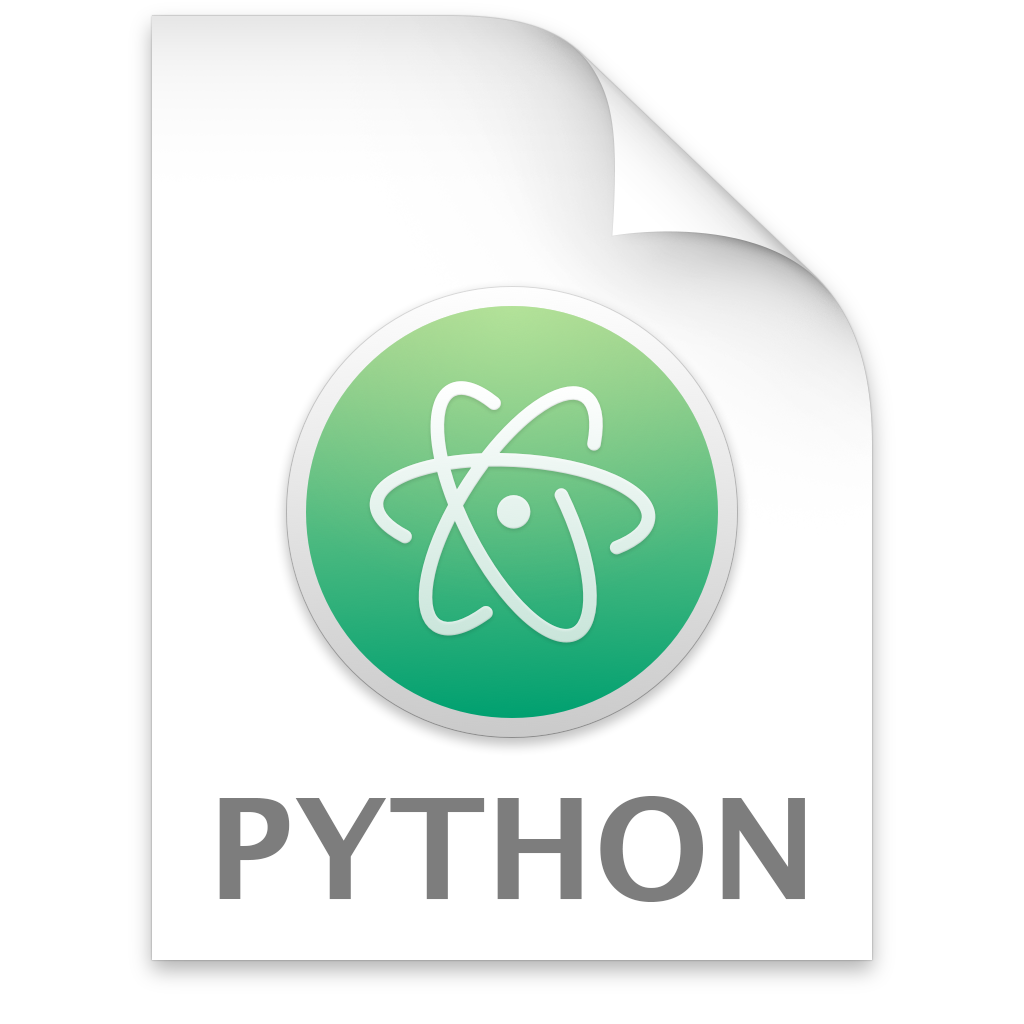
<style>
.page{position:relative;width:1024px;height:1024px;background:#ffffff}
.page>*{position:absolute;margin:0}
.t1{font:140px "LucidaGrande-Bold";color:#7d7d7d}
</style>
<div class="page">
<p class="t1" style="left:219px;top:796px;width:586px;height:106px">PYTHON</p>
</div>
